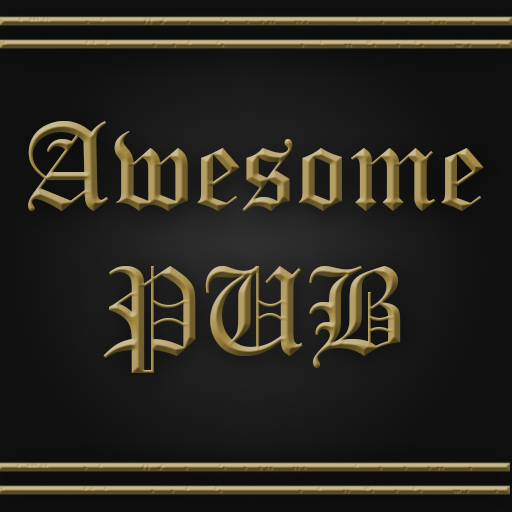
<style>
.page{position:relative;width:512px;height:512px}
.page>*{position:absolute;margin:0}
.t1{font:120.6px "OldEnglishTextMT"}
</style>
<div class="page">
<p class="t1" style="left:28px;top:121px;width:456px;height:252px;text-align:center">Awesome<br>PUB</p>
</div>
